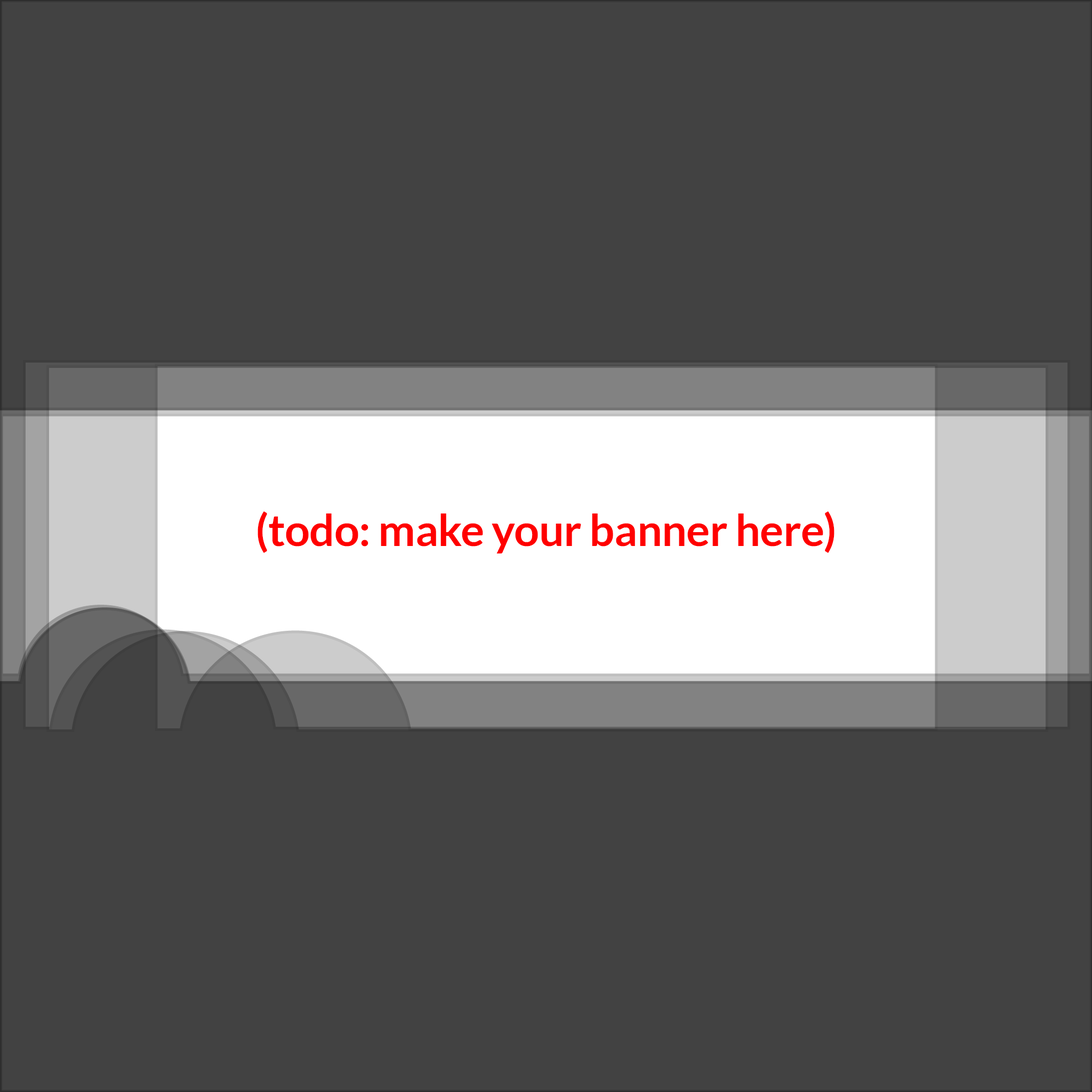
<style>
.page{position:relative;width:1092px;height:1092px;background:#424242}
.page>*{position:absolute;margin:0}
.t1{font:44.3px "Lato-Bold";letter-spacing:-0.01em;color:#ff0000}
</style>
<div class="page">
<p class="t1" style="left:258px;top:511px;width:576px;height:42px">(todo: make your banner here)</p>
</div>
